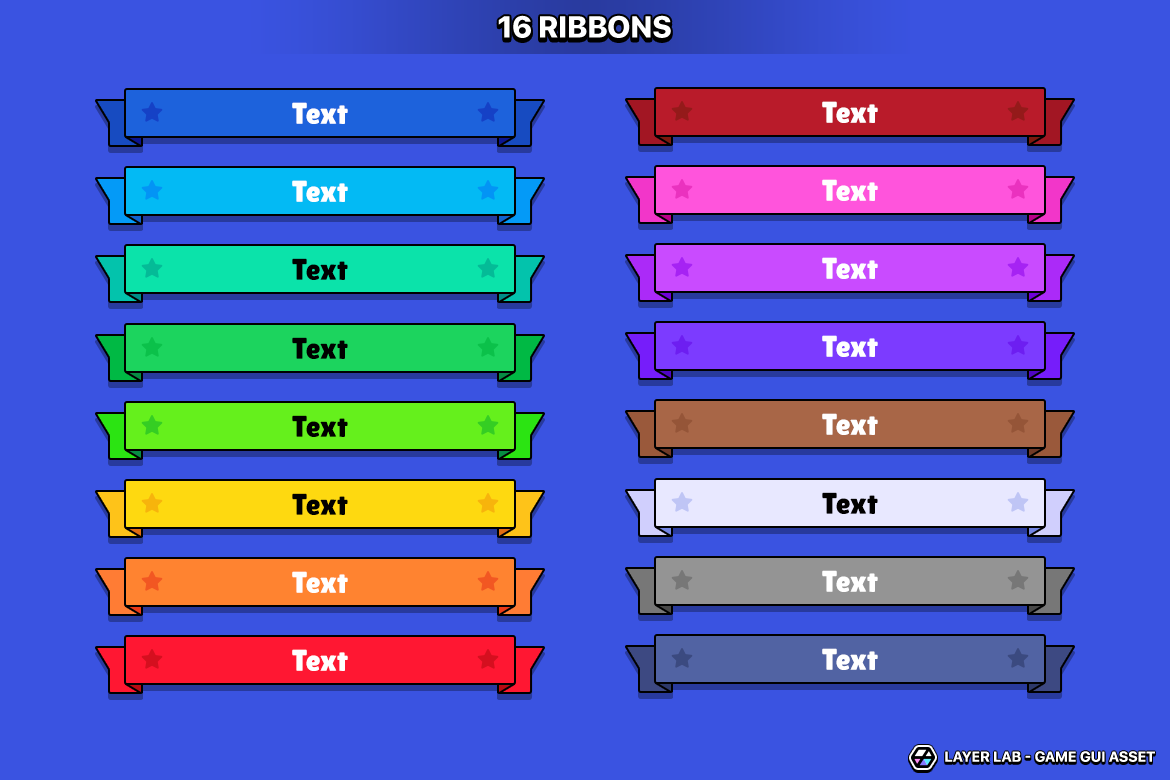
<style>
.page{position:relative;width:1170px;height:780px;background:#3a53e1}
.page>*{position:absolute;margin:0}
.t1{font:30px "SFUIDisplay-Heavy";color:#ffffff;text-transform:uppercase}
.t2{font:30px "LilitaOne";color:#ffffff}
.t3{font:30px "LilitaOne";color:#010000}
.t4{font:14.4px "SFUIDisplay-Bold";letter-spacing:0.02em;color:#ffffff;text-transform:uppercase}
</style>
<div class="page">
<p class="t1" style="left:498px;top:15px;width:173px;height:23px">16 Ribbons</p>
<p class="t2" style="left:292px;top:102px;width:56px;height:22px">Text</p>
<p class="t2" style="left:822px;top:101px;width:56px;height:22px">Text</p>
<p class="t2" style="left:292px;top:180px;width:56px;height:22px">Text</p>
<p class="t2" style="left:822px;top:179px;width:56px;height:22px">Text</p>
<p class="t2" style="left:822px;top:257px;width:56px;height:22px">Text</p>
<p class="t3" style="left:292px;top:258px;width:56px;height:22px">Text</p>
<p class="t3" style="left:292px;top:337px;width:56px;height:22px">Text</p>
<p class="t2" style="left:822px;top:335px;width:56px;height:22px">Text</p>
<p class="t2" style="left:822px;top:413px;width:56px;height:22px">Text</p>
<p class="t3" style="left:292px;top:415px;width:56px;height:22px">Text</p>
<p class="t3" style="left:292px;top:493px;width:56px;height:22px">Text</p>
<p class="t3" style="left:822px;top:492px;width:56px;height:22px">Text</p>
<p class="t2" style="left:292px;top:571px;width:56px;height:22px">Text</p>
<p class="t2" style="left:822px;top:570px;width:56px;height:22px">Text</p>
<p class="t2" style="left:292px;top:649px;width:56px;height:22px">Text</p>
<p class="t2" style="left:822px;top:648px;width:56px;height:22px">Text</p>
<p class="t4" style="left:945px;top:751px;width:210px;height:11px">Layer Lab - Game GUI Asset</p>
</div>
